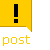
<style>
.page{position:relative;width:50px;height:50px;background:#ffffff}
.page>*{position:absolute;margin:0}
.t1{font:12px "Verdana";color:#ffcc00}
</style>
<div class="page">
<p class="t1" style="left:3px;top:35px;width:27px;height:11px">post</p>
</div>
